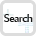
<style>
.page{position:relative;width:36px;height:36px;background:#ffffff}
.page>*{position:absolute;margin:0}
.t1{font:10.7px "AmiraParadiso";letter-spacing:-0.04em;color:#000000}
</style>
<div class="page">
<p class="t1" style="left:3px;top:14px;width:30px;height:8px;opacity:0.96">Search</p>
</div>
